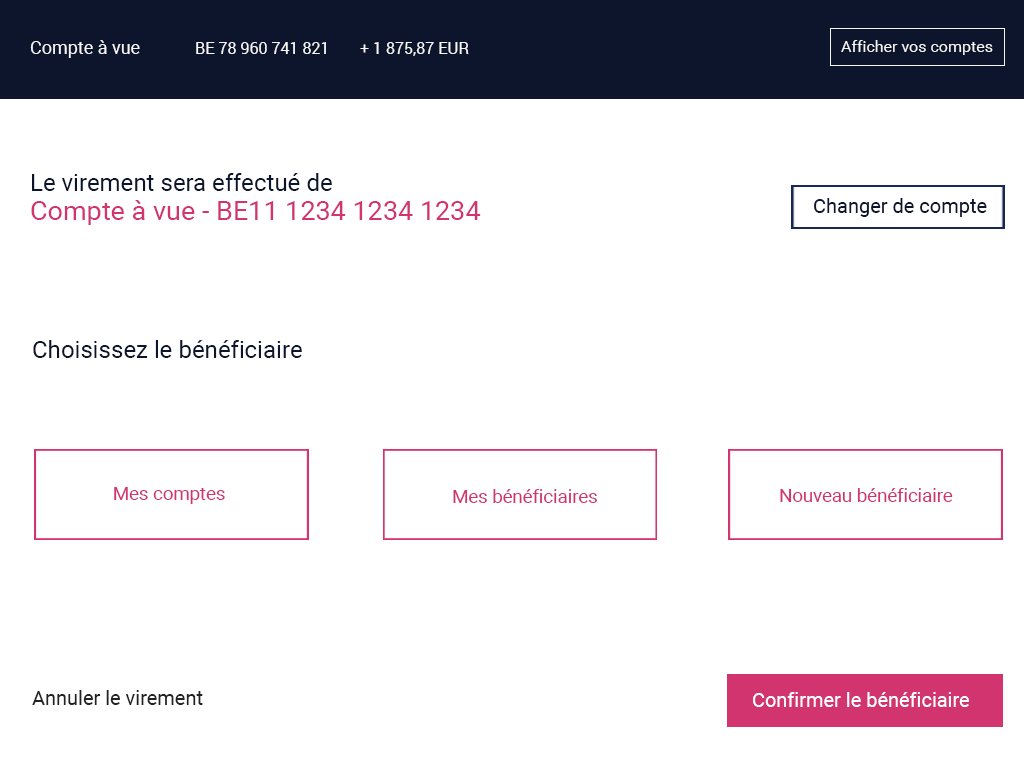
<style>
.page{position:relative;width:1024px;height:768px;background:#ffffff}
.page>*{position:absolute;margin:0}
.t1{font:18px "Roboto-Regular";color:#f5f5f5}
.t2{font:16px "Roboto-Regular";color:#f5f5f5}
.t3{font:24px "Roboto-Regular";color:#0d152d}
.t4{font:20px "Roboto-Regular";color:#0d152d}
.t5{font:27px "Roboto-Regular";color:#d1346e}
.t6{font:18.5px "Roboto-Regular";color:#d1346e}
.t7{font:20px "Roboto-Regular";color:#222222}
.t8{font:20px "Roboto-Regular";color:#ffffff}
</style>
<div class="page">
<p class="t1" style="left:30px;top:40px;width:110px;height:18px">Compte à vue</p>
<p class="t2" style="left:841px;top:40px;width:152px;height:15px">Afficher vos comptes</p>
<p class="t2" style="left:196px;top:42px;width:130px;height:12px">BE 78 960 741 821</p>
<p class="t2" style="left:360px;top:42px;width:109px;height:14px">+ 1 875,87 EUR</p>
<p class="t3" style="left:32px;top:173px;width:300px;height:18px">Le virement sera effectué de</p>
<p class="t4" style="left:814px;top:198px;width:173px;height:19px">Changer de compte</p>
<p class="t5" style="left:31px;top:200px;width:450px;height:25px">Compte à vue - BE11 1234 1234 1234</p>
<p class="t3" style="left:33px;top:340px;width:269px;height:18px">Choisissez le bénéficiaire</p>
<p class="t6" style="left:114px;top:487px;width:111px;height:17px">Mes comptes</p>
<p class="t6" style="left:453px;top:489px;width:144px;height:14px">Mes bénéficiaires</p>
<p class="t6" style="left:780px;top:488px;width:173px;height:14px">Nouveau bénéficiaire</p>
<p class="t7" style="left:32px;top:690px;width:171px;height:15px">Annuler le virement</p>
<p class="t8" style="left:753px;top:692px;width:216px;height:15px">Confirmer le bénéficiaire</p>
</div>
